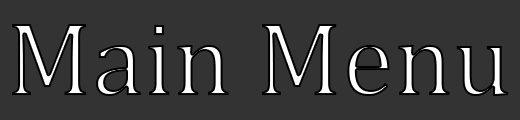
<style>
.page{position:relative;width:520px;height:120px;background:#333333}
.page>*{position:absolute;margin:0}
.t1{font:105.8px "CambriaMath"}
</style>
<div class="page">
<p class="t1" style="left:12px;top:24px;width:496px;height:72px">Main Menu</p>
</div>
